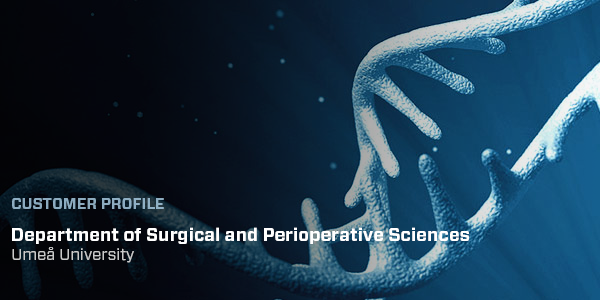
<style>
.page{position:relative;width:600px;height:300px}
.page>*{position:absolute;margin:0}
.t1{font:15px "Forza-Bold";color:#8cacc0;text-transform:uppercase}
.t2{font:18px/19px "Forza-Bold";color:#ffffff}
.t3{font:16px/19px "Forza-Book";color:#cacaca}
</style>
<div class="page">
<p class="t1" style="left:12px;top:198px;width:152px;height:11px">Customer Profile</p>
<p class="t2" style="left:12px;top:227px;width:457px;height:36px">Department of Surgical and Perioperative Sciences<br><span class="t3">Umeå University</span></p>
</div>
